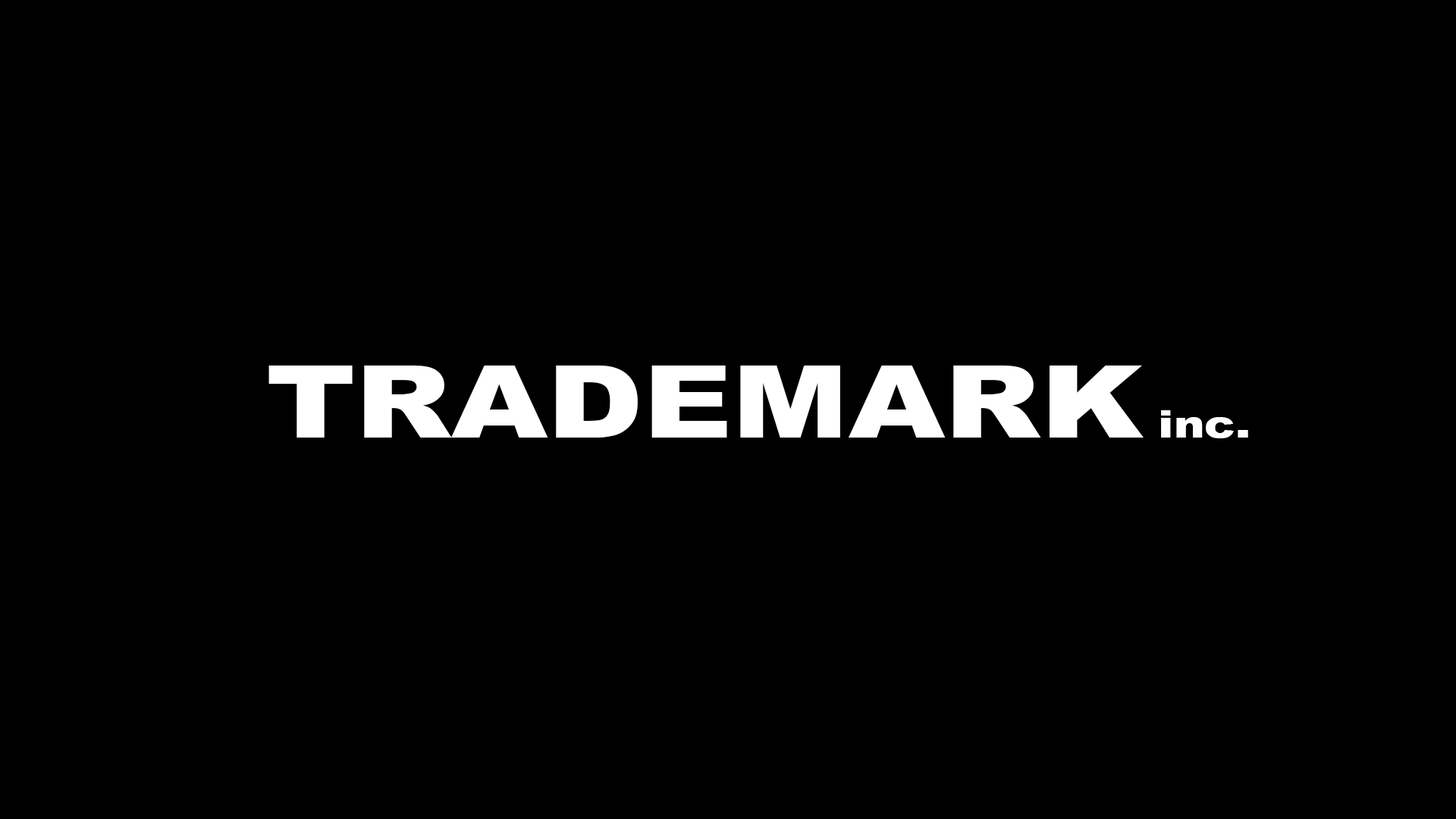
<style>
.page{position:relative;width:1456px;height:819px;background:#000000}
.page>*{position:absolute;margin:0}
.t1{font:101.1px "Arial-Black";color:#ffffff;scale:1.22 1}
.t2{font:37.9px "Arial-Black";color:#ffffff;scale:1.22 1}
</style>
<div class="page">
<p class="t1" style="left:268px;top:366px;width:980px;height:72px">TRADEMARK  <span class="t2">inc.</span></p>
</div>
